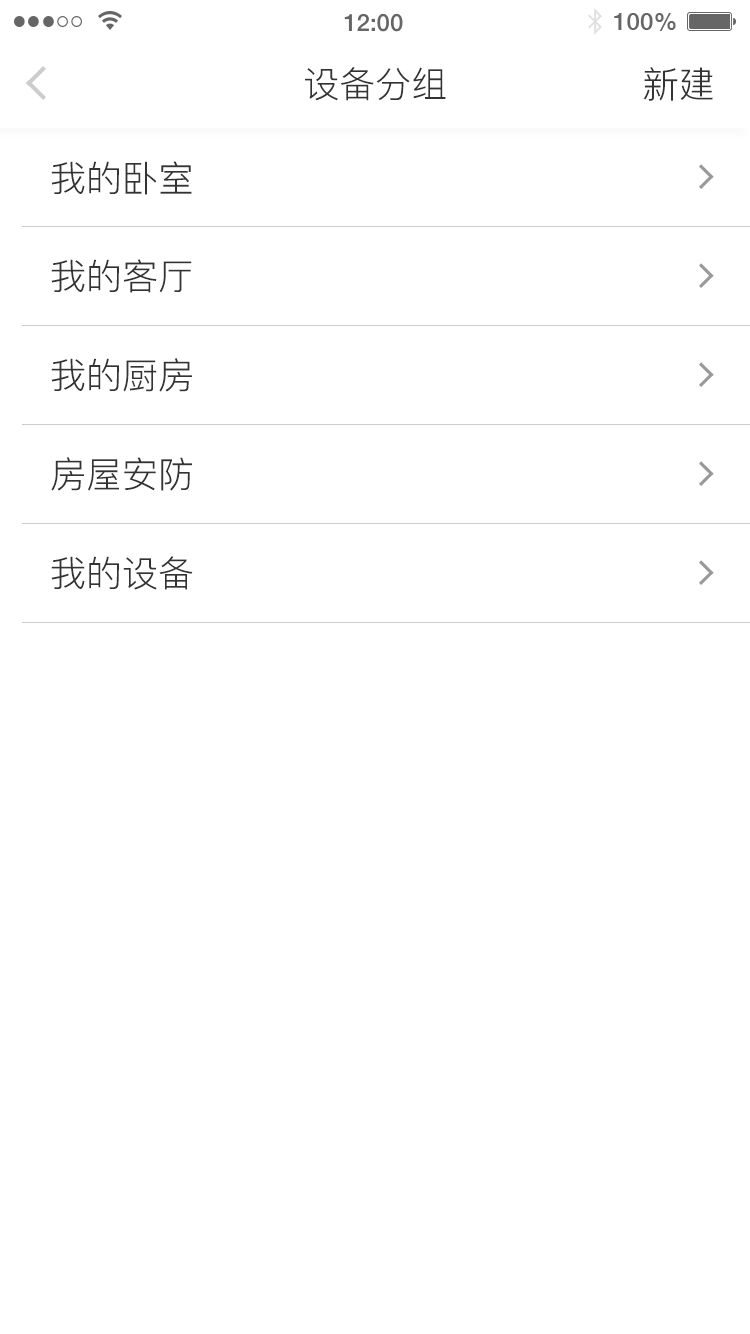
<style>
.page{position:relative;width:750px;height:1334px;background:#ffffff}
.page>*{position:absolute;margin:0}
.t1{font:36px "PingFang-SC-Regular";color:#333333}
</style>
<div class="page">
<p class="t1" style="left:305px;top:67px;width:141px;height:34px">设备分组</p>
<p class="t1" style="left:643px;top:67px;width:70px;height:34px">新建</p>
<p class="t1" style="left:51px;top:161px;width:141px;height:34px">我的卧室</p>
<p class="t1" style="left:51px;top:259px;width:141px;height:34px">我的客厅</p>
<p class="t1" style="left:51px;top:358px;width:141px;height:34px">我的厨房</p>
<p class="t1" style="left:51px;top:457px;width:141px;height:34px">房屋安防</p>
<p class="t1" style="left:51px;top:556px;width:142px;height:34px">我的设备</p>
</div>
